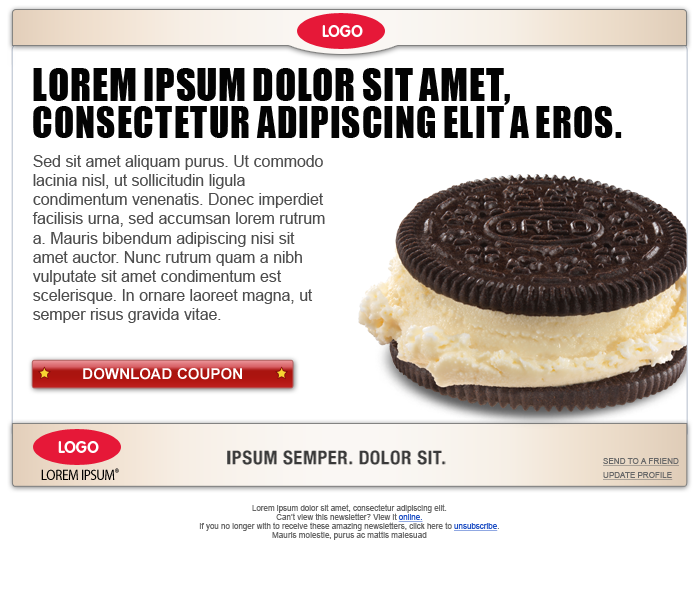
<style>
.page{position:relative;width:700px;height:609px;background:#ffffff}
.page>*{position:absolute;margin:0}
.t1{font:16px "VAGRoundedStd-Bold";color:#ffffff}
.t2{font:40.7px/37px "Impact";letter-spacing:-0.005em;color:#030303;text-transform:uppercase;scale:0.92 1}
.t3{font:42px/37px "Impact";letter-spacing:-0.005em;color:#030303;text-transform:uppercase;scale:0.92 1}
.t4{font:16px "ArialMT";color:#4d4d4d}
.t5{font:15px "Arial-BoldMT";letter-spacing:0.01em;color:#ffffff;text-transform:uppercase}
.t6{font:8px/14px "ArialMT";color:#696969;text-transform:uppercase;text-decoration:underline}
.t7{font:14.8px "MyriadPro-Regular";letter-spacing:-0.025em;color:#000000;text-transform:uppercase;scale:0.9 1}
.t8{font:21.3px "MyriadPro-Regular";letter-spacing:-0.025em;color:#000000;text-transform:uppercase;scale:0.9 1}
.t9{font:8px/9px "ArialMT";color:#696969}
.t10{font:8px/9px "ArialMT";color:#2252c5;text-decoration:underline}
</style>
<div class="page">
<p class="t1" style="left:322px;top:25px;width:41px;height:12px">LOGO</p>
<p class="t2" style="left:33px;top:68px;width:589px;height:70px"><span class="t3">Lorem ipsum dolor sit amet,<br></span>consectetur adipiscing elit a eros.</p>
<p class="t4" style="left:32px;top:155px;width:293px;height:168px">Sed sit amet aliquam purus. Ut commodo lacinia nisl, ut sollicitudin ligula condimentum venenatis. Donec imperdiet facilisis urna, sed accumsan lorem rutrum a. Mauris bibendum adipiscing nisi sit amet auctor. Nunc rutrum quam a nibh vulputate sit amet condimentum est scelerisque. In ornare laoreet magna, ut semper risus gravida vitae.</p>
<p class="t5" style="left:83px;top:368px;width:159px;height:12px">DOWNLOAD COUPON</p>
<p class="t1" style="left:58px;top:441px;width:41px;height:12px">LOGO</p>
<p class="t6" style="left:603px;top:458px;width:76px;height:22px">send to a friend<br>update profile</p>
<p class="t7" style="left:41px;top:468px;width:78px;height:12px">LOREM IPSUM<span class="t8">®</span></p>
<p class="t9" style="left:199px;top:504px;width:300px;height:36px;text-align:center">Lorem ipsum dolor sit amet, consectetur adipiscing elit. <br>Can’t view this newsletter? View it <span class="t10">online. <br></span>If you no longer with to receive these amazing newsletters, click here to <span class="t10">unsubscribe</span>.<br>Mauris molestie, purus ac mattis malesuad</p>
</div>
